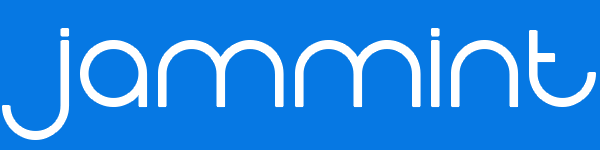
<style>
.page{position:relative;width:600px;height:150px;background:#0678e3}
.page>*{position:absolute;margin:0}
.t1{font:130px "EightOne";letter-spacing:0.04em;color:#ffffff}
</style>
<div class="page">
<p class="t1" style="left:3px;top:29px;width:592px;height:110px">jammint</p>
</div>
